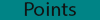
<style>
.page{position:relative;width:100px;height:20px;background:#008486}
.page>*{position:absolute;margin:0}
.t1{font:20.8px "MyriadPro-Regular";color:#101413}
</style>
<div class="page">
<p class="t1" style="left:24px;top:2px;width:52px;height:14px">Points</p>
</div>
